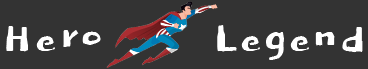
<style>
.page{position:relative;width:368px;height:69px;background:#333333}
.page>*{position:absolute;margin:0}
.t1{font:54px "Dokdo-Regular";letter-spacing:0.005em;color:#ffffff}
</style>
<div class="page">
<p class="t1" style="left:6px;top:25px;width:357px;height:35px">Hero       Legend</p>
</div>
